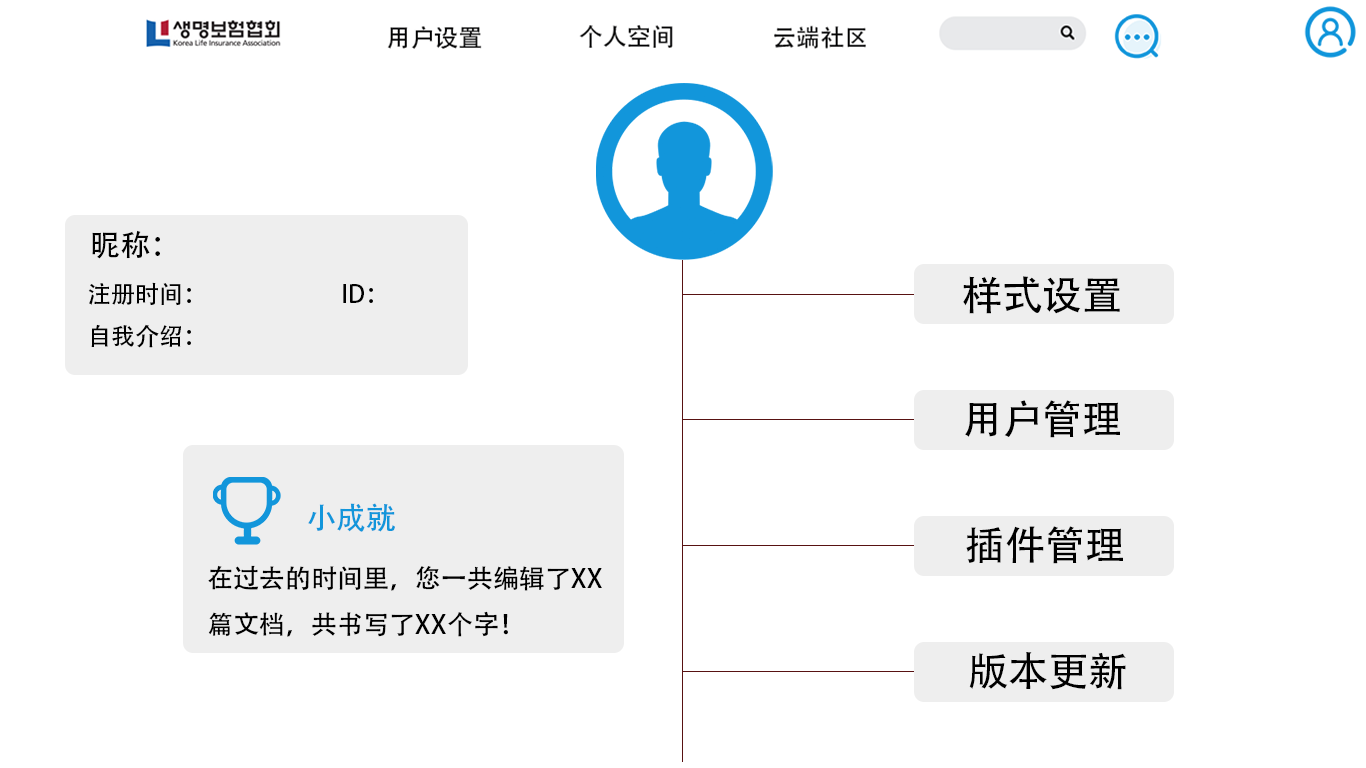
<style>
.page{position:relative;width:1366px;height:768px;background:#ffffff}
.page>*{position:absolute;margin:0}
.t1{font:24px "AdobeHeitiStd-Regular";color:#000000}
.t2{font:30px "AdobeHeitiStd-Regular";color:#000000}
.t3{font:40px "AdobeHeitiStd-Regular";color:#000000}
.t4{font:30px "AdobeHeitiStd-Regular";color:#1296db}
.t5{font:26px "AdobeHeitiStd-Regular";color:#000000}
</style>
<div class="page">
<p class="t1" style="left:88px;top:230px;width:285px;height:118px"><span class="t2">昵称：<br></span>注册时间：                         ID：<br>自我介绍：</p>
<p class="t3" style="left:963px;top:276px;width:157px;height:38px">样式设置</p>
<p class="t3" style="left:965px;top:400px;width:155px;height:38px">用户管理</p>
<p class="t4" style="left:308px;top:503px;width:87px;height:29px">小成就</p>
<p class="t3" style="left:966px;top:526px;width:157px;height:38px">插件管理</p>
<p class="t5" style="left:208px;top:565px;width:394px;height:72px">在过去的时间里，您一共编辑了XX<br>篇文档，共书写了XX个字！</p>
<p class="t3" style="left:969px;top:652px;width:157px;height:38px">版本更新</p>
</div>
